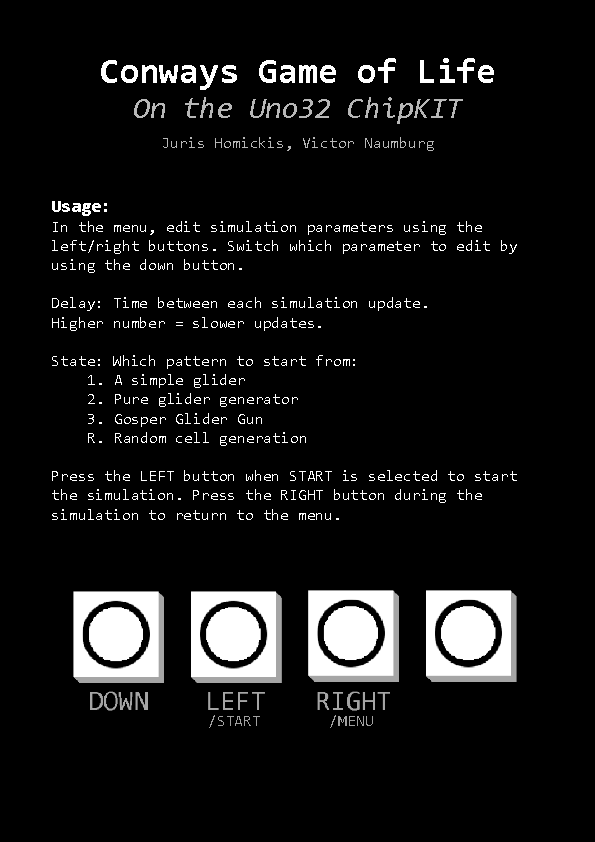
<style>
.page{position:relative;width:595px;height:842px;background:#000000}
.page>*{position:absolute;margin:0}
.t1{font:36px "Consolas-Bold";color:#ffffff}
.t2{font:30px "Consolas-Italic";color:#b7b7b7}
.t3{font:16px "Consolas";color:#b7b7b7}
.t4{font:18px "Consolas-Bold";color:#ffffff}
.t5{font:16px "Consolas";color:#ffffff}
.t6{font:16px "Consolas";color:#a1a1a1}
</style>
<div class="page">
<p class="t1" style="left:101px;top:58px;width:393px;height:32px">Conways Game of Life</p>
<p class="t2" style="left:134px;top:97px;width:329px;height:27px">On the Uno32 ChipKIT</p>
<p class="t3" style="left:163px;top:137px;width:271px;height:14px">Juris Homickis, Victor Naumburg</p>
<p class="t4" style="left:52px;top:201px;width:55px;height:15px">Usage:</p>
<p class="t5" style="left:52px;top:221px;width:465px;height:299px">In the menu, edit simulation parameters using the <br>left/right buttons. Switch which parameter to edit by <br>using the down button.<br><br>Delay: Time between each simulation update. <br>Higher number = slower updates.<br><br>State: Which pattern to start from:<br> 1. A simple glider<br> 2. Pure glider generator<br> 3. Gosper Glider Gun<br> R. Random cell generation<br><br>Press the LEFT button when START is selected to start<br>the simulation. Press the RIGHT button during the<br>simulation to return to the menu.</p>
<p class="t6" style="left:209px;top:715px;width:51px;height:13px">/START</p>
<p class="t6" style="left:330px;top:715px;width:43px;height:13px">/MENU</p>
</div>
